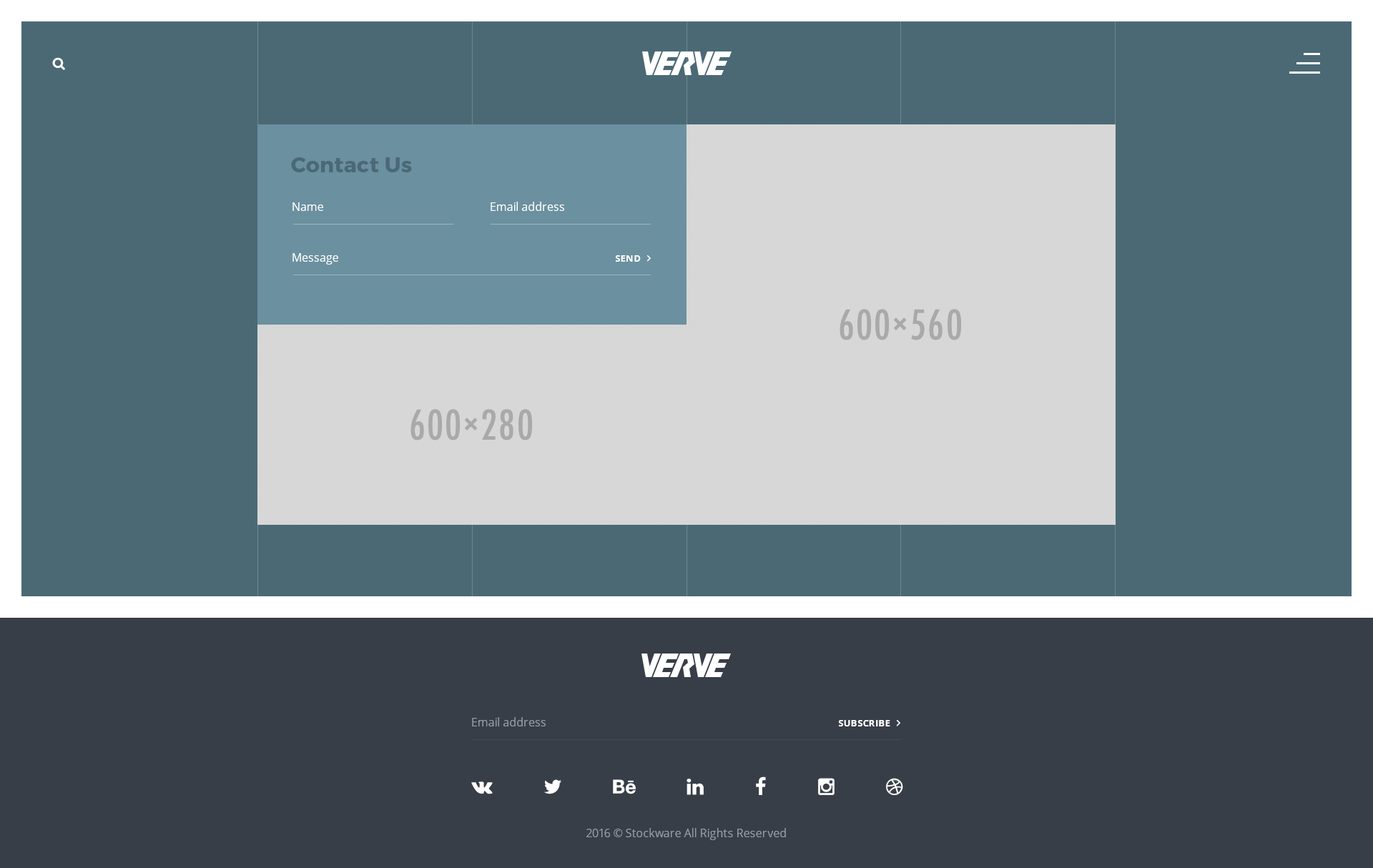
<style>
.page{position:relative;width:1373px;height:868px;background:#4b6975}
.page>*{position:absolute;margin:0}
.t1{font:21.5px "Montserrat-Bold";letter-spacing:0.02em;color:#4b6975}
.t2{font:11.4px "OpenSans";color:#ffffff}
.t3{font:9.3px "OpenSans-Bold";letter-spacing:0.02em;color:#ffffff;text-transform:uppercase}
.t4{font:11.4px "OpenSans";color:#969aa1}
</style>
<div class="page">
<p class="t1" style="left:291px;top:157px;width:121px;height:15px">Contact Us</p>
<p class="t2" style="left:293px;top:202px;width:30px;height:9px">Name</p>
<p class="t2" style="left:491px;top:202px;width:73px;height:9px">Email address</p>
<p class="t2" style="left:293px;top:253px;width:45px;height:12px">Message</p>
<p class="t3" style="left:616px;top:255px;width:25px;height:7px">send</p>
<p class="t4" style="left:472px;top:717px;width:74px;height:10px">Email address</p>
<p class="t3" style="left:839px;top:720px;width:51px;height:7px">subscribe</p>
<p class="t4" style="left:587px;top:828px;width:199px;height:12px">2016 © Stockware All Rights Reserved</p>
</div>
